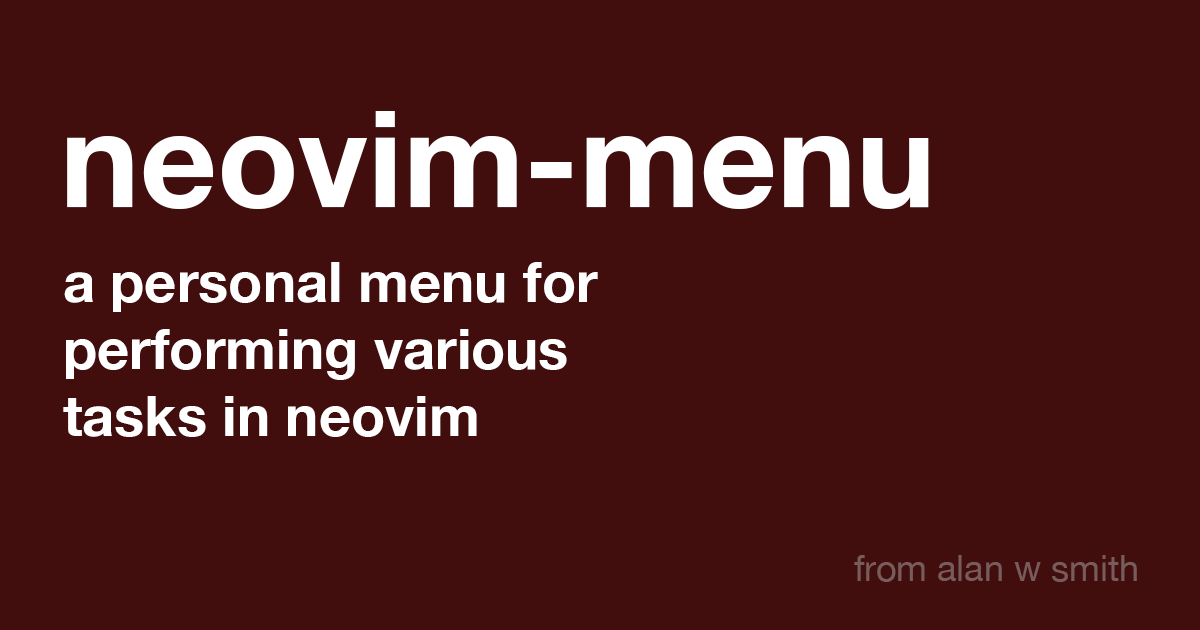
<style>
.page{position:relative;width:1200px;height:630px;background:#420d0d}
.page>*{position:absolute;margin:0}
.t1{font:134px "HelveticaNeue-Bold";color:#ffffff}
.t2{font:56px "HelveticaNeue-Bold";color:#ffffff}
.t3{font:36px "HelveticaNeue";color:#785c5c}
</style>
<div class="page">
<p class="t1" style="left:67px;top:111px;width:862px;height:98px">neovim-menu</p>
<p class="t2" style="left:63px;top:262px;width:535px;height:175px">a personal menu for <br>performing various <br>tasks in neovim</p>
<p class="t3" style="left:854px;top:555px;width:283px;height:27px">from alan w smith</p>
</div>
